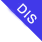
<style>
.page{position:relative;width:42px;height:42px;background:#ffffff}
.page>*{position:absolute;margin:0}
.t1{font:12.4px "ArialMT";letter-spacing:0.05em;color:#ffffff}
</style>
<div class="page">
<p class="t1" style="left:17px;top:3px;width:20px;height:21px;rotate:45deg">DIS</p>
</div>
